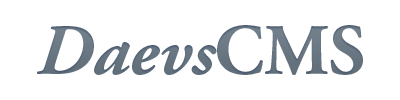
<style>
.page{position:relative;width:400px;height:100px;background:#ffffff}
.page>*{position:absolute;margin:0}
.t1{font:72px "AGaramondPro-BoldItalic";color:#65737f}
.t2{font:72px "AGaramondPro-Bold";color:#65737f}
</style>
<div class="page">
<p class="t1" style="left:37px;top:25px;width:326px;height:50px">Daevs<span class="t2">CMS</span></p>
</div>
